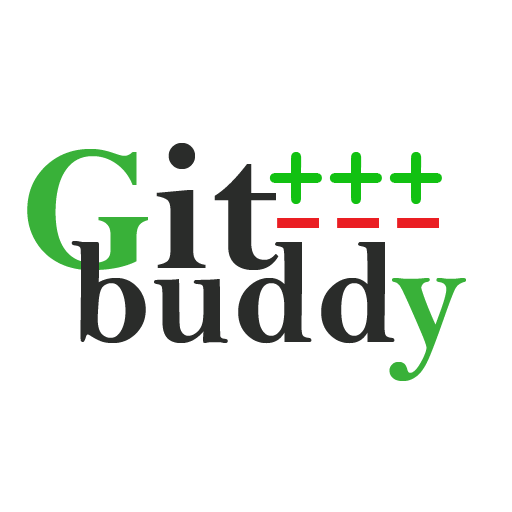
<style>
.page{position:relative;width:512px;height:512px;background:#ffffff}
.page>*{position:absolute;margin:0}
.t1{font:200px "Perpetua-Bold";color:#2a2c2a}
.t2{font:200px "Perpetua-Bold";color:#39b139}
.t3{font:100px "CourierNewPS-BoldMT";color:#12c112}
.t4{font:100px "CourierNewPS-BoldMT";color:#ea1e23}
.t5{font:150px "BellMTBold";color:#2a2c2a}
.t6{font:150px "BellMTBold";color:#39b139}
</style>
<div class="page">
<p class="t1" style="left:27px;top:143px;width:252px;height:127px"><span class="t2">G</span>it</p>
<p class="t3" style="left:269px;top:152px;width:173px;height:52px">+++</p>
<p class="t4" style="left:277px;top:218px;width:162px;height:10px">---</p>
<p class="t5" style="left:71px;top:241px;width:395px;height:140px">budd<span class="t6">y</span></p>
</div>
